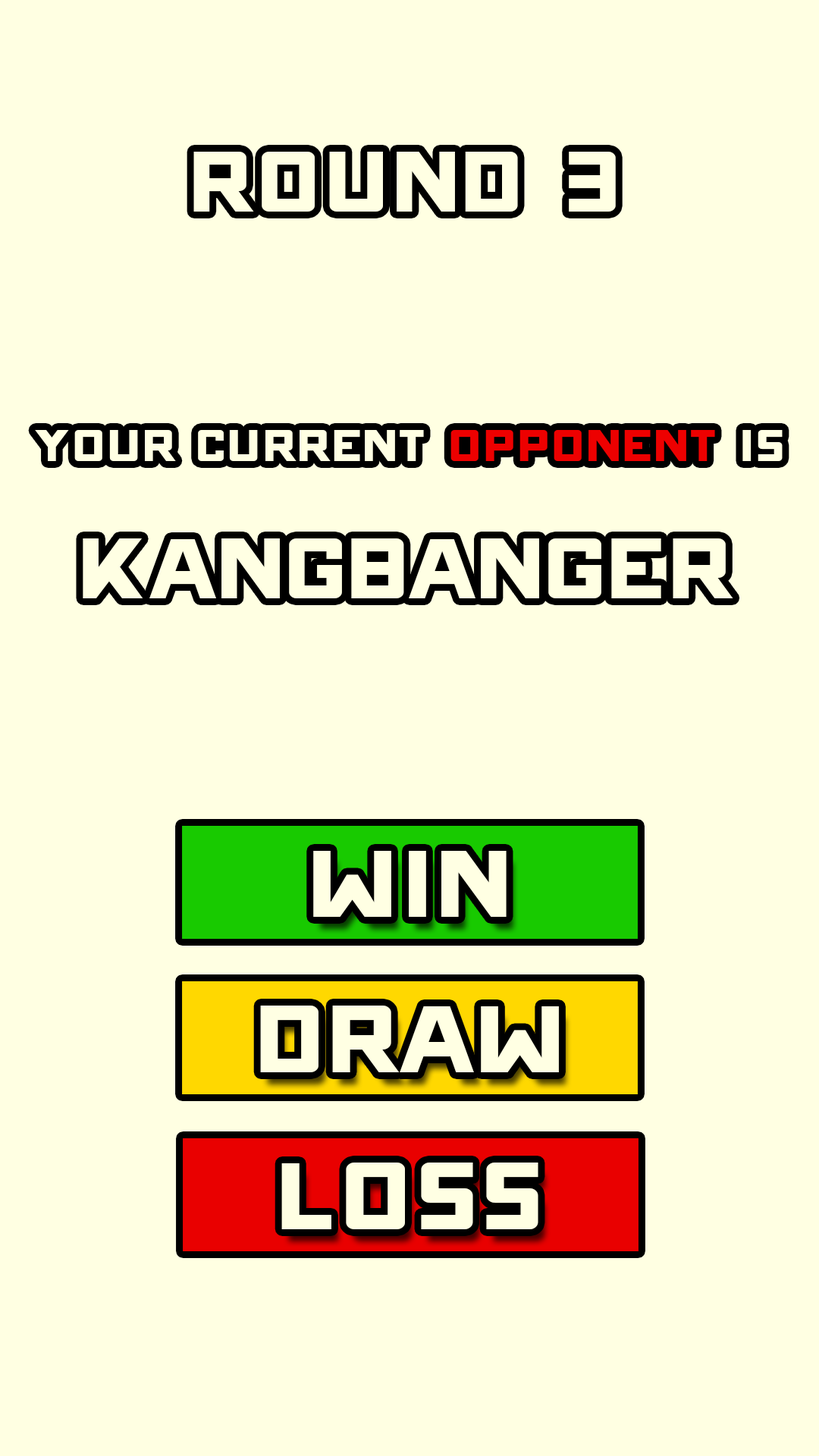
<style>
.page{position:relative;width:819px;height:1456px;background:#ffffe2}
.page>*{position:absolute;margin:0}
.t1{font:136.5px "ONRAMP";color:#ffffe3;scale:1.1 1}
.t2{font:70.5px "ONRAMP";color:#ffffe3;scale:1.1 1}
.t3{font:70.5px "ONRAMP";color:#ed0000;scale:1.1 1}
.t4{font:151.7px "ONRAMP";color:#ffffe3;scale:1.1 1}
</style>
<div class="page">
<p class="t1" style="left:193px;top:152px;width:423px;height:60px">Round 3</p>
<p class="t2" style="left:35px;top:430px;width:748px;height:31px">Your Current <span class="t3">Opponent </span>Is</p>
<p class="t1" style="left:83px;top:538px;width:650px;height:60px">kangbanger</p>
<p class="t4" style="left:313px;top:851px;width:194px;height:66px">Win</p>
<p class="t4" style="left:260px;top:1006px;width:299px;height:66px">Draw</p>
<p class="t4" style="left:281px;top:1163px;width:257px;height:66px">Loss</p>
</div>
